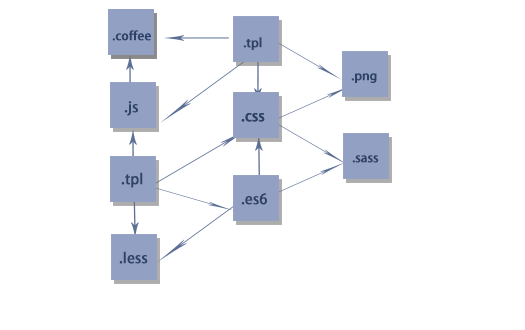
<style>
.page{position:relative;width:525px;height:330px;background:#ffffff}
.page>*{position:absolute;margin:0}
.t1{font:12px "AdobeHeitiStd-Regular";color:#2e4267;font-weight:bold}
.t2{font:14px "AdobeHeitiStd-Regular";color:#2e4267;font-weight:bold}
</style>
<div class="page">
<p class="t1" style="left:112px;top:30px;width:39px;height:11px">.coffee</p>
<p class="t1" style="left:243px;top:37px;width:19px;height:13px">.tpl</p>
<p class="t1" style="left:351px;top:73px;width:26px;height:10px">.png</p>
<p class="t2" style="left:124px;top:101px;width:14px;height:15px">.js</p>
<p class="t2" style="left:241px;top:113px;width:24px;height:9px">.css</p>
<p class="t2" style="left:241px;top:113px;width:24px;height:9px">.css</p>
<p class="t1" style="left:352px;top:155px;width:27px;height:8px">.sass</p>
<p class="t2" style="left:121px;top:172px;width:22px;height:16px">.tpl</p>
<p class="t2" style="left:241px;top:193px;width:26px;height:12px">.es6</p>
<p class="t2" style="left:119px;top:251px;width:29px;height:13px">.less</p>
</div>
